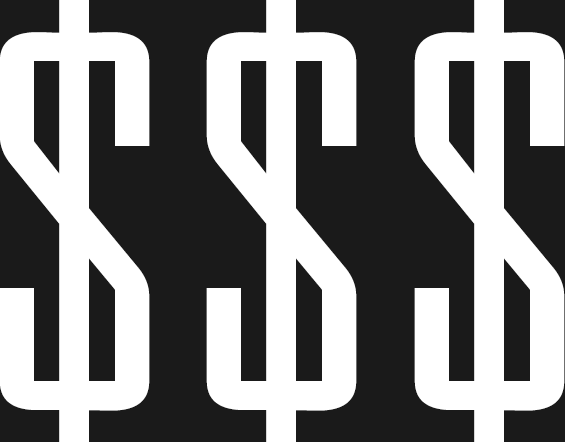
<style>
.page{position:relative;width:565px;height:442px;background:#1a1a1a}
.page>*{position:absolute;margin:0}
.t1{font:500px "AgencyFB-Reg";color:#ffffff}
</style>
<div class="page">
<p class="t1" style="left:0px;top:0px;width:565px;height:442px">$$$</p>
</div>
